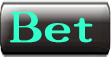
<style>
.page{position:relative;width:111px;height:57px}
.page>*{position:absolute;margin:0}
.t1{font:60px "18thCentury";color:#33ffcc;scale:1.3 1}
</style>
<div class="page">
<p class="t1" style="left:9px;top:11px;width:84px;height:32px">Bet</p>
</div>
